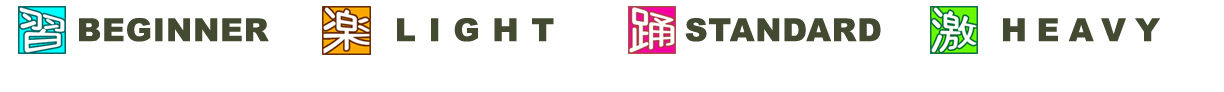
<style>
.page{position:relative;width:1224px;height:92px;background:#ffffff}
.page>*{position:absolute;margin:0}
.t1{font:31.6px "Arial-Black";letter-spacing:0.025em;color:#424a31}
.t2{font:31.6px "Arial-Black";letter-spacing:0.4em;color:#424a31}
.t3{font:31.6px "Arial-Black";letter-spacing:0.3em;color:#424a31}
</style>
<div class="page">
<p class="t1" style="left:79px;top:18px;width:190px;height:24px">BEGINNER</p>
<p class="t2" style="left:397px;top:18px;width:157px;height:24px">LIGHT</p>
<p class="t1" style="left:685px;top:18px;width:196px;height:24px">STANDARD</p>
<p class="t3" style="left:1003px;top:18px;width:157px;height:24px">HEAVY</p>
</div>
